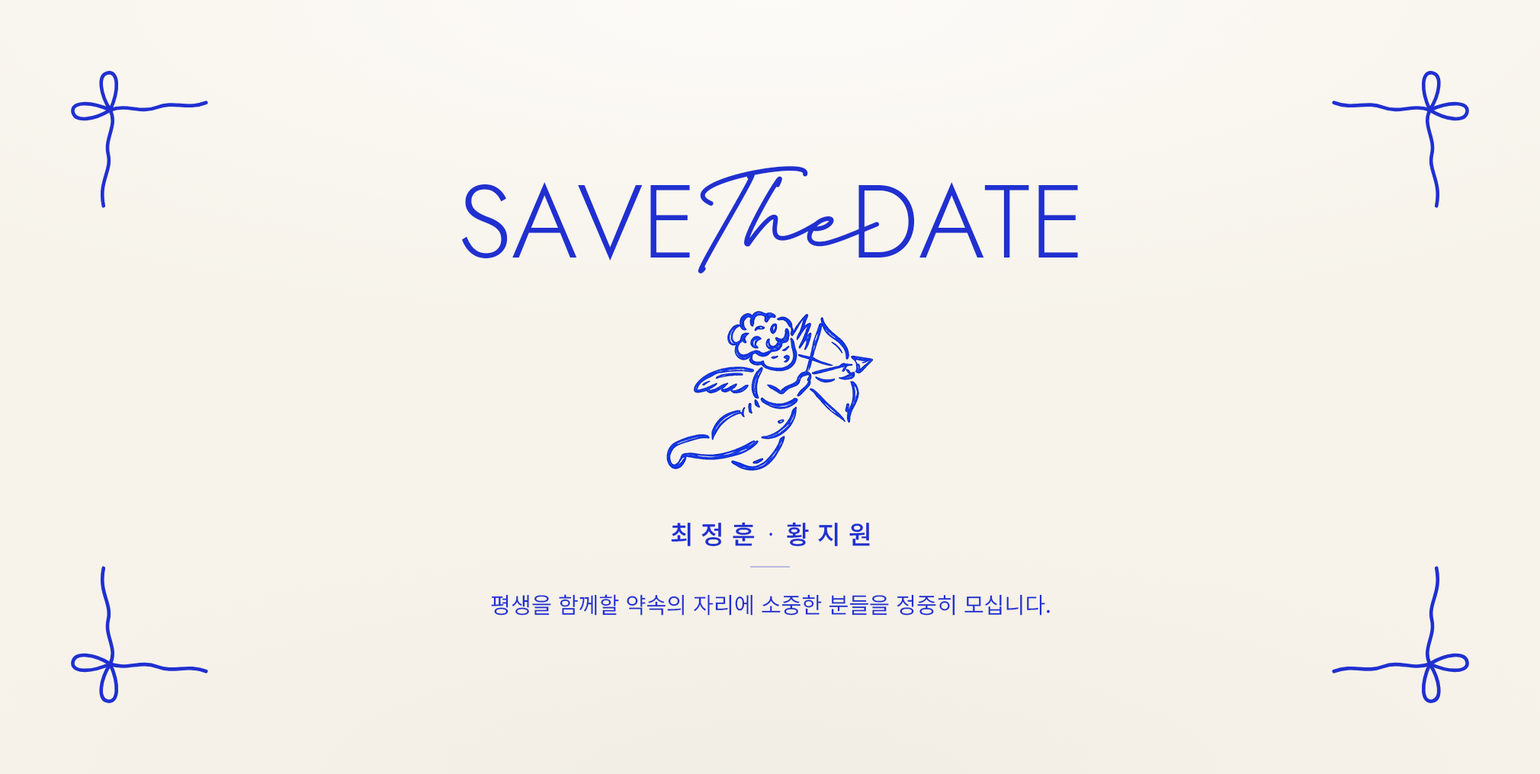
<style>
.page{position:relative;width:1540px;height:774px;background:#f7f3ea}
.page>*{position:absolute;margin:0}
.t1{font:124.4px "FestiganRegular";color:#2030d0}
.t2{font:103.7px "Jost-Light";letter-spacing:-0.005em;color:#2030d0}
.t3{font:25.4px "NotoSansKR-Medium";letter-spacing:0.3em;color:#2030d0}
.t4{font:25.4px "NotoSansKR-Medium";letter-spacing:0.1em;color:#2030d0}
.t5{font:25.4px "NotoSansKR-Light";letter-spacing:0.1em;color:#2030d0}
.t6{font:25.4px "NotoSansKR-Medium";letter-spacing:0.26em;color:#2030d0}
.t7{font:22.2px "NotoSansKR-DemiLight";color:#2030d0}
</style>
<div class="page">
<p class="t1" style="left:697px;top:166px;width:183px;height:108px">The</p>
<p class="t2" style="left:461px;top:182px;width:617px;height:79px">SAVE     DATE</p>
<p class="t3" style="left:671px;top:522px;width:199px;height:25px">최정<span class="t4">훈 </span><span class="t5">· </span>황지<span class="t6">원</span></p>
<p class="t7" style="left:491px;top:595px;width:559px;height:21px">평생을 함께할 약속의 자리에 소중한 분들을 정중히 모십니다.</p>
</div>
